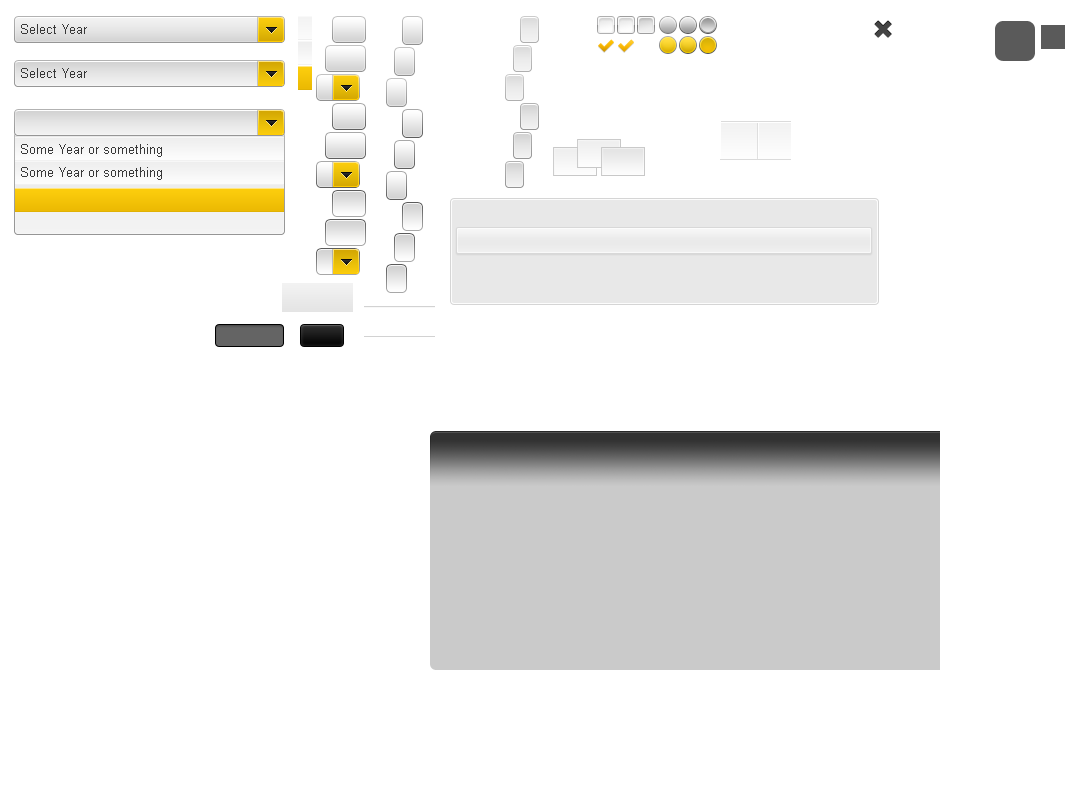
<style>
.page{position:relative;width:1085px;height:803px;background:#ffffff}
.page>*{position:absolute;margin:0}
.t1{font:13px "ArialMT";color:#383838}
</style>
<div class="page">
<p class="t1" style="left:21px;top:24px;width:66px;height:10px">Select Year</p>
<p class="t1" style="left:21px;top:68px;width:66px;height:10px">Select Year</p>
<p class="t1" style="left:21px;top:144px;width:141px;height:13px">Some Year or something</p>
<p class="t1" style="left:21px;top:167px;width:141px;height:13px">Some Year or something</p>
</div>
